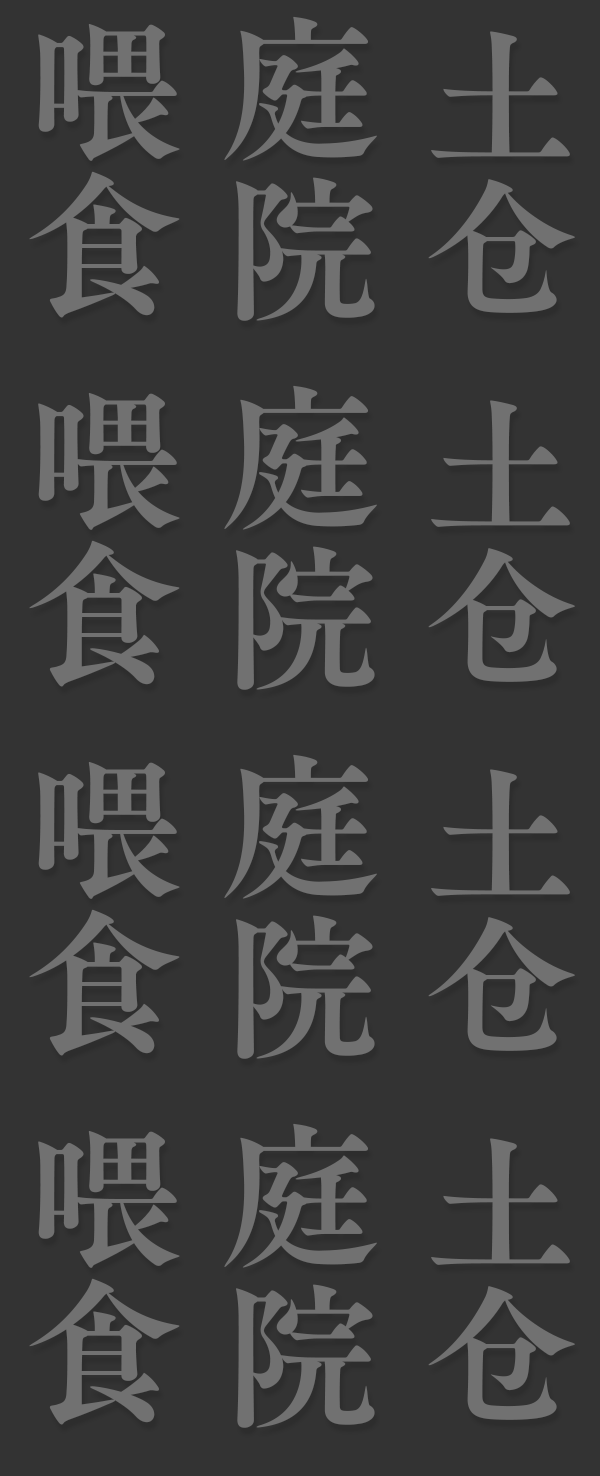
<style>
.page{position:relative;width:600px;height:1476px;background:#333333}
.page>*{position:absolute;margin:0}
.t1{font:158.5px "FZFW-ZhuZiAOldMin-B--GB1-0";color:#717171}
.t2{font:156.3px "FZFW-ZhuZiAOldMin-B--GB1-0";color:#717171}
.t3{font:153.1px "FZFW-ZhuZiAOldMin-B--GB1-0";color:#717171}
</style>
<div class="page">
<p class="t1" style="left:224px;top:16px;width:153px;height:305px">庭院</p>
<p class="t2" style="left:29px;top:23px;width:151px;height:295px">喂食</p>
<p class="t3" style="left:428px;top:31px;width:147px;height:282px">土仓</p>
<p class="t1" style="left:224px;top:385px;width:153px;height:305px">庭院</p>
<p class="t2" style="left:29px;top:392px;width:151px;height:295px">喂食</p>
<p class="t3" style="left:428px;top:400px;width:147px;height:282px">土仓</p>
<p class="t2" style="left:29px;top:761px;width:151px;height:295px">喂食</p>
<p class="t1" style="left:224px;top:754px;width:153px;height:305px">庭院</p>
<p class="t3" style="left:428px;top:769px;width:147px;height:282px">土仓</p>
<p class="t2" style="left:29px;top:1130px;width:151px;height:295px">喂食</p>
<p class="t1" style="left:224px;top:1123px;width:153px;height:305px">庭院</p>
<p class="t3" style="left:428px;top:1138px;width:147px;height:282px">土仓</p>
</div>
